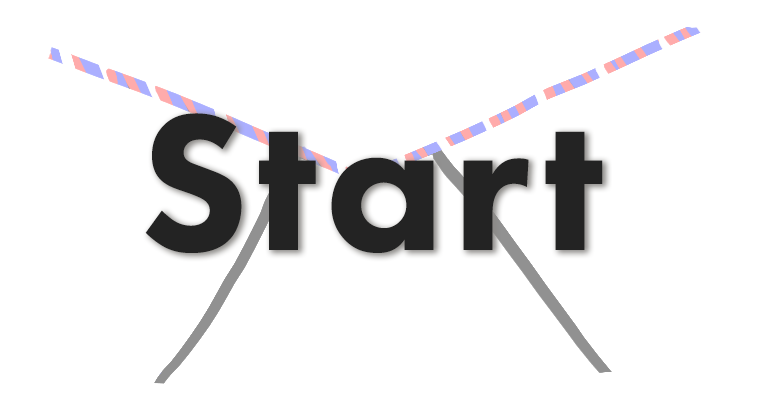
<style>
.page{position:relative;width:771px;height:405px;background:#ffffff}
.page>*{position:absolute;margin:0}
.t1{font:200px "FuturaPT-Heavy";letter-spacing:0.04em;color:#232323}
</style>
<div class="page">
<p class="t1" style="left:145px;top:113px;width:458px;height:140px">Start</p>
</div>
